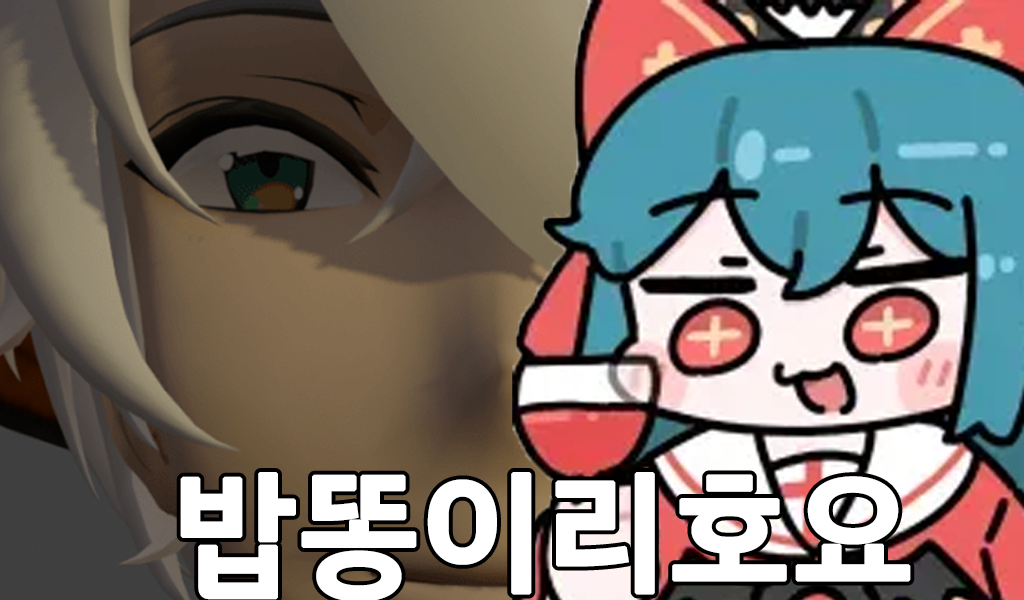
<style>
.page{position:relative;width:1024px;height:600px}
.page>*{position:absolute;margin:0}
.t1{font:134.4px "IBMPlexSansKR-SemiBold";color:#ffffff;text-transform:uppercase;font-weight:bold}
</style>
<div class="page">
<p class="t1" style="left:180px;top:472px;width:731px;height:130px">밥똥이리호요</p>
</div>
